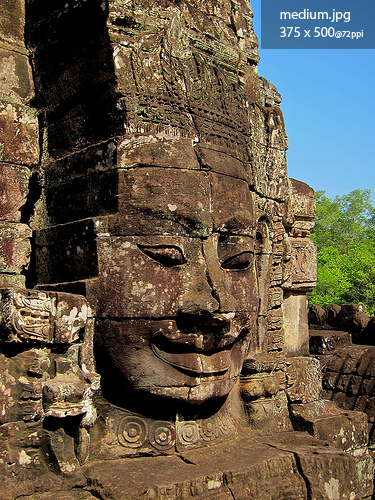
<style>
.page{position:relative;width:375px;height:500px}
.page>*{position:absolute;margin:0}
.t1{font:14px/18px "MyriadPro-Regular";color:#ffffff}
.t2{font:9px/18px "MyriadPro-Regular";color:#ffffff}
</style>
<div class="page">
<p class="t1" style="left:280px;top:9px;width:83px;height:30px">medium.jpg<br>375 x 500<span class="t2">@72ppi</span></p>
</div>
